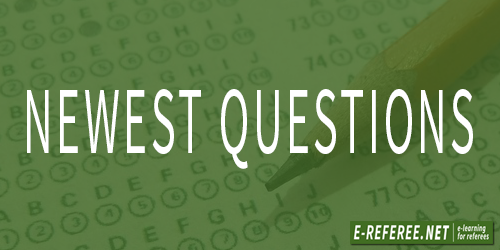
<style>
.page{position:relative;width:500px;height:250px}
.page>*{position:absolute;margin:0}
.t1{font:96.1px "SourceSansPro-Regular";letter-spacing:0.08em;color:#ffffff;scale:0.48 1}
</style>
<div class="page">
<p class="t1" style="left:27px;top:89px;width:446px;height:80px">NEWEST QUESTIONS</p>
</div>
